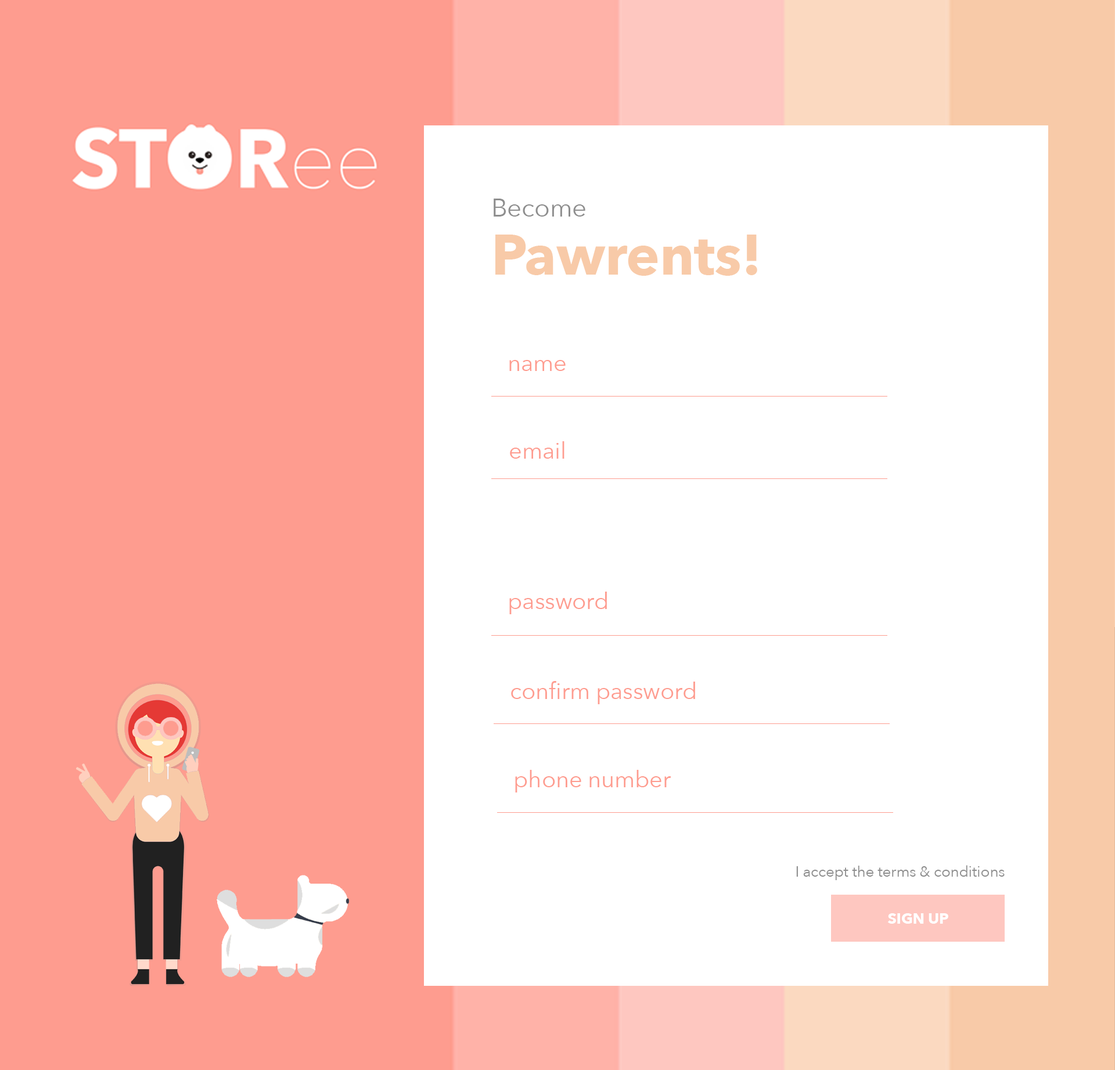
<style>
.page{position:relative;width:1115px;height:1070px;background:#ffffff}
.page>*{position:absolute;margin:0}
.t1{font:56.1px/57.7px "AvenirNext-Bold";color:#f8caa8}
.t2{font:25.3px/31.6px "AvenirNext-Regular";color:#8e8e8e}
.t3{font:23px "AvenirNext-Regular";color:#fe9c8f}
.t4{font:14.9px "AvenirNext-Regular";color:#8e8e8e}
.t5{font:14.9px "AvenirNext-Bold";color:#ffffff}
</style>
<div class="page">
<p class="t1" style="left:493px;top:199px;width:264px;height:77px"><span class="t2">Become <br></span>Pawrents!</p>
<p class="t3" style="left:509px;top:360px;width:56px;height:11px">name</p>
<p class="t3" style="left:510px;top:441px;width:54px;height:18px">email</p>
<p class="t3" style="left:509px;top:592px;width:98px;height:22px">password</p>
<p class="t3" style="left:511px;top:681px;width:184px;height:23px">confirm password</p>
<p class="t3" style="left:515px;top:770px;width:156px;height:22px">phone number</p>
<p class="t4" style="left:796px;top:865px;width:208px;height:15px">I accept the terms &amp; conditions</p>
<p class="t5" style="left:887px;top:913px;width:61px;height:11px">SIGN UP</p>
</div>
